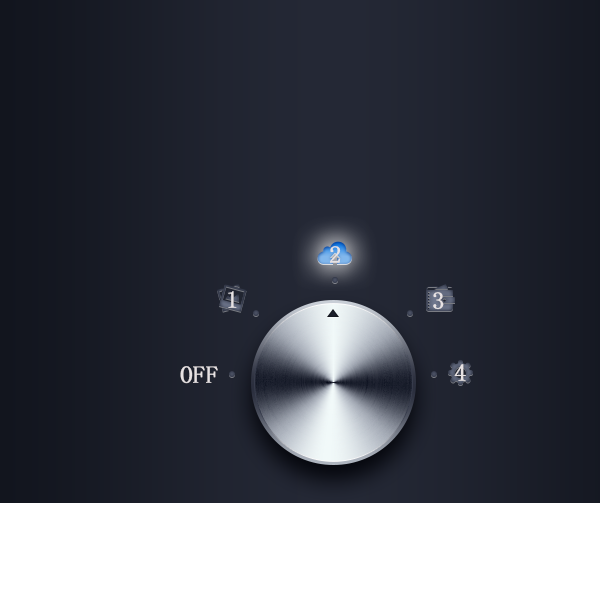
<style>
.page{position:relative;width:600px;height:600px}
.page>*{position:absolute;margin:0}
.t1{font:24px "SimSun-ExtB";color:#e7e2e3;font-weight:bold}
</style>
<div class="page">
<p class="t1" style="left:330px;top:246px;width:11px;height:17px">2</p>
<p class="t1" style="left:228px;top:291px;width:9px;height:17px">1</p>
<p class="t1" style="left:433px;top:292px;width:11px;height:18px">3</p>
<p class="t1" style="left:180px;top:366px;width:38px;height:18px">OFF</p>
<p class="t1" style="left:454px;top:364px;width:12px;height:17px">4</p>
</div>
